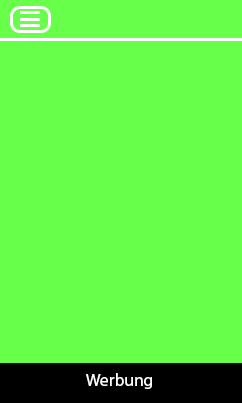
<style>
.page{position:relative;width:242px;height:403px;background:#68ff4a}
.page>*{position:absolute;margin:0}
.t1{font:12.1px "MyriadPro-Regular";color:#ffffff}
</style>
<div class="page">
<p class="t1" style="left:86px;top:373px;width:66px;height:16px">Werbung</p>
</div>
